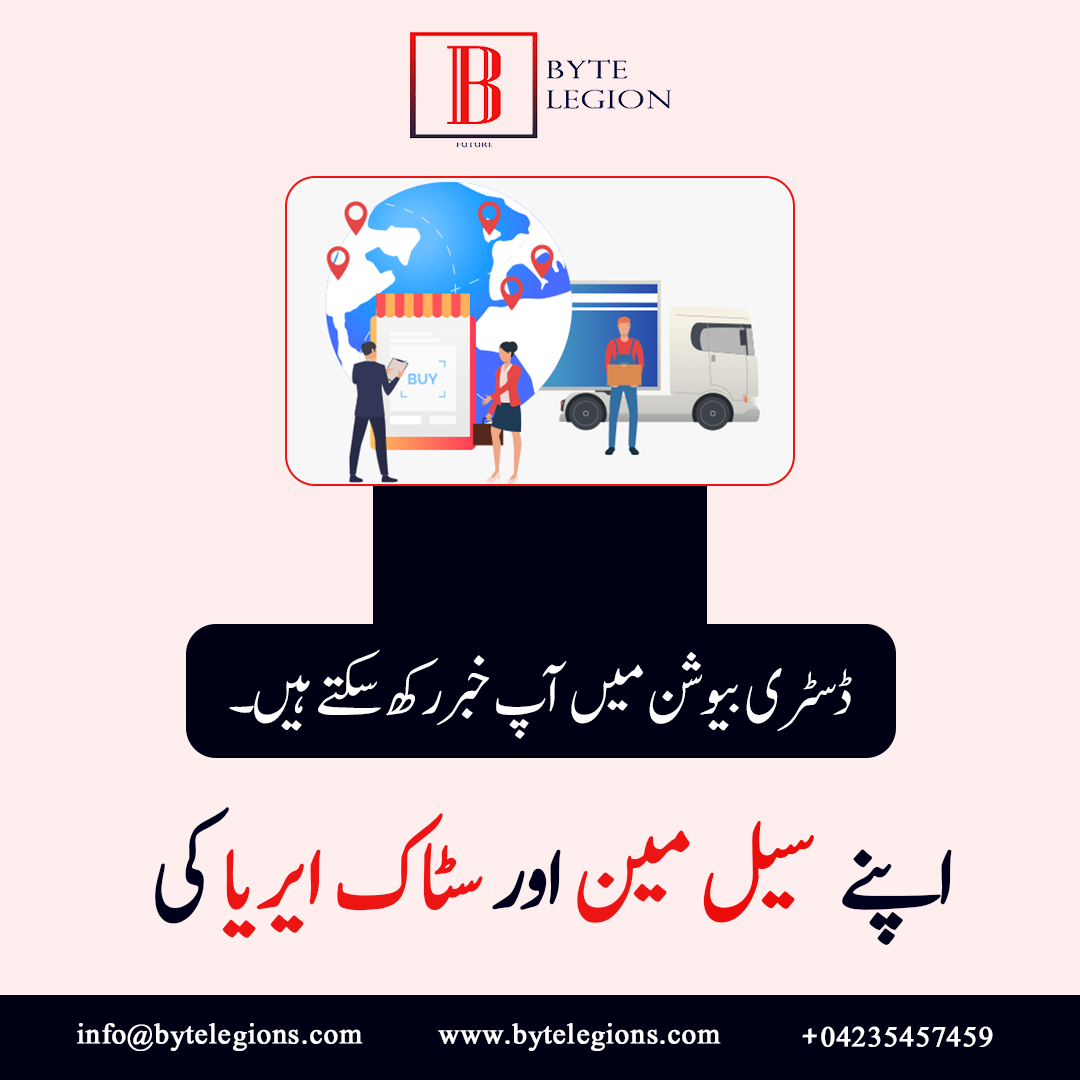
<style>
.page{position:relative;width:1080px;height:1080px;background:#feeded}
.page>*{position:absolute;margin:0}
.t1{font:70px "Jameel-Noori-Nastaleeq";letter-spacing:-0.07em;color:#ffffff;text-transform:uppercase}
.t2{font:108px "Jameel-Noori-Nastaleeq";letter-spacing:-0.07em;color:#ed1414;text-transform:uppercase;font-weight:bold}
.t3{font:108px "Jameel-Noori-Nastaleeq";letter-spacing:-0.07em;color:#00001c;text-transform:uppercase;font-weight:bold}
.t4{font:108px "Jameel-Noori-Nastaleeq";letter-spacing:-0.07em;color:#eb0c0c;text-transform:uppercase;font-weight:bold}
.t5{font:35px "Jameel-Noori-Nastaleeq";color:#ffffff;font-weight:bold}
</style>
<div class="page">
<p class="t1" style="left:229px;top:649px;width:623px;height:90px">ڈسٹری بیوشن میں آپ خبررکھ سکتے ہیں۔</p>
<p class="t2" style="left:155px;top:807px;width:797px;height:138px"><span class="t3">اپنے </span><span class="t4">سیل </span>مین <span class="t3">اور </span>سٹاک ایریا<span class="t3"> کی</span></p>
<p class="t5" style="left:77px;top:1023px;width:286px;height:28px">info@bytelegions.com</p>
<p class="t5" style="left:438px;top:1023px;width:283px;height:28px">www.bytelegions.com</p>
<p class="t5" style="left:802px;top:1026px;width:191px;height:21px">+04235457459</p>
</div>
